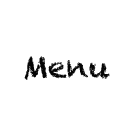
<style>
.page{position:relative;width:140px;height:140px;background:#ffffff}
.page>*{position:absolute;margin:0}
.t1{font:30px "Chalkduster";color:#050505}
</style>
<div class="page">
<p class="t1" style="left:24px;top:56px;width:86px;height:24px">Menu</p>
</div>
